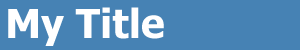
<style>
.page{position:relative;width:300px;height:50px;background:#4682b4}
.page>*{position:absolute;margin:0}
.t1{font:40px "Tahoma-Bold";color:#ffffff}
</style>
<div class="page">
<p class="t1" style="left:8px;top:7px;width:156px;height:39px">My Title</p>
</div>
